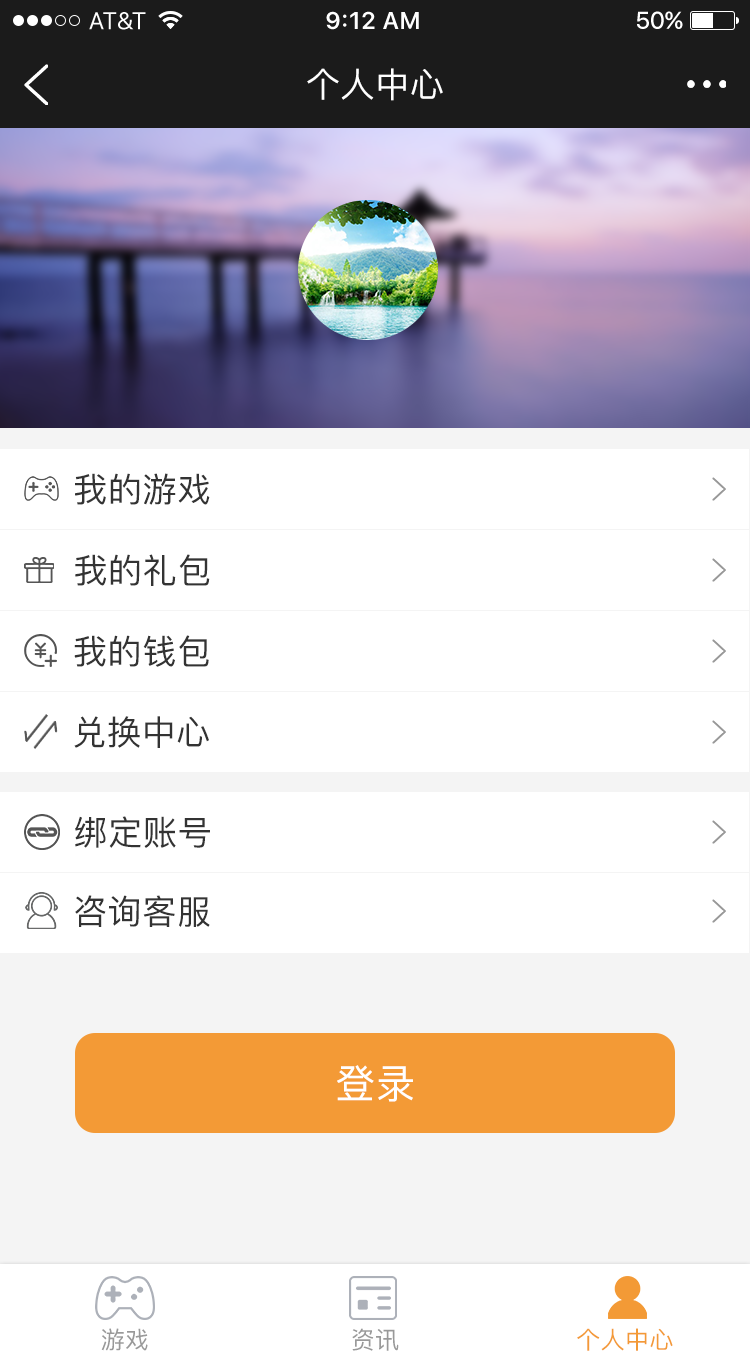
<style>
.page{position:relative;width:750px;height:1362px;background:#ffffff}
.page>*{position:absolute;margin:0}
.t1{font:34px "PingFang-SC-Medium";letter-spacing:0.02em;color:#ffffff}
.t2{font:34px "PingFang-SC-Medium";letter-spacing:0.02em;color:#333333}
.t3{font:40px "PingFang-SC-Medium";letter-spacing:0.02em;color:#ffffff}
.t4{font:24px "PingFang-SC-Medium";letter-spacing:0.02em;color:#999999}
.t5{font:24px "PingFang-SC-Medium";letter-spacing:0.02em;color:#f39a36}
</style>
<div class="page">
<p class="t1" style="left:307px;top:68px;width:136px;height:33px">个人中心</p>
<p class="t2" style="left:75px;top:473px;width:135px;height:32px">我的游戏</p>
<p class="t2" style="left:75px;top:554px;width:135px;height:32px">我的礼包</p>
<p class="t2" style="left:74px;top:635px;width:135px;height:32px">我的钱包</p>
<p class="t2" style="left:74px;top:716px;width:135px;height:32px">兑换中心</p>
<p class="t2" style="left:75px;top:816px;width:135px;height:32px">绑定账号</p>
<p class="t2" style="left:75px;top:895px;width:135px;height:32px">咨询客服</p>
<p class="t3" style="left:337px;top:1065px;width:76px;height:37px">登录</p>
<p class="t4" style="left:101px;top:1328px;width:47px;height:23px">游戏</p>
<p class="t4" style="left:352px;top:1328px;width:47px;height:23px">资讯</p>
<p class="t5" style="left:577px;top:1328px;width:96px;height:23px">个人中心</p>
</div>
